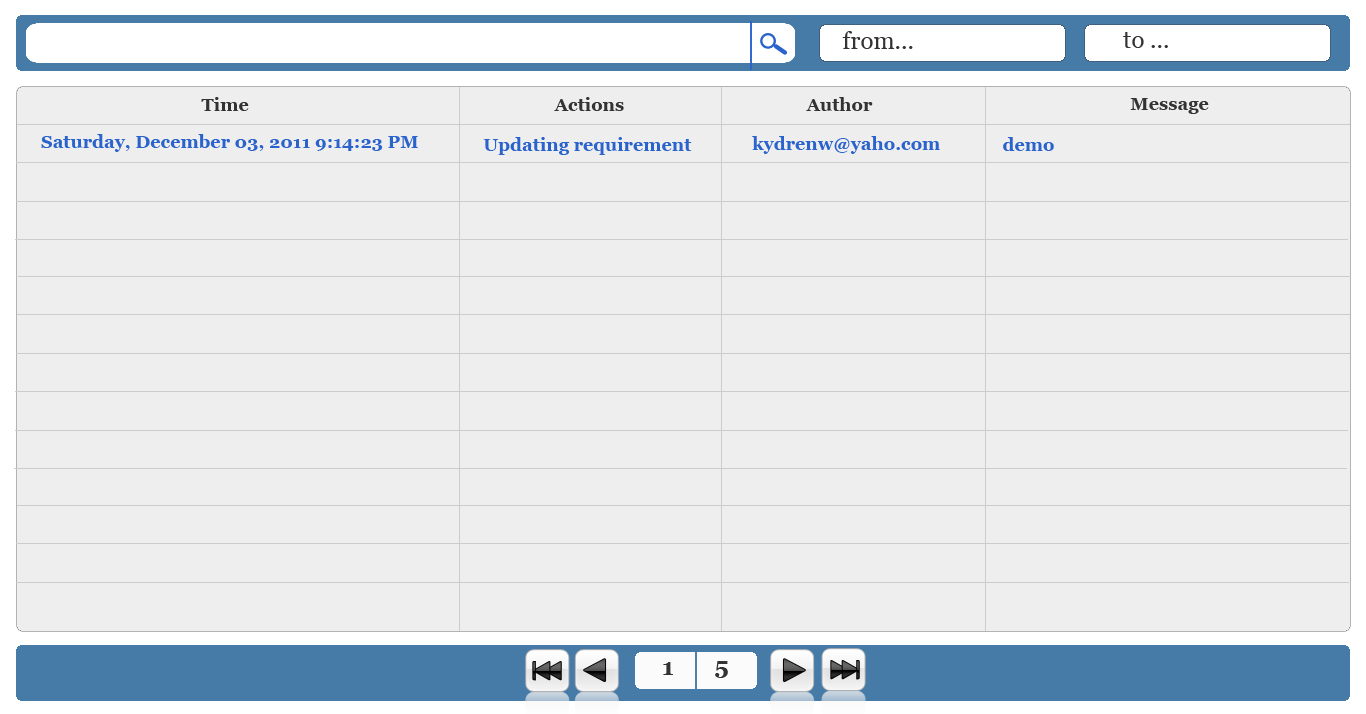
<style>
.page{position:relative;width:1366px;height:714px;background:#eeeeee}
.page>*{position:absolute;margin:0}
.t1{font:24px "Vani";color:#333333}
.t2{font:18px "Vani-Bold";color:#333333}
.t3{font:18px "Vani-Bold";color:#2a63cc}
.t4{font:24px "Vani-Bold";color:#333333}
</style>
<div class="page">
<p class="t1" style="left:842px;top:31px;width:71px;height:18px">from...</p>
<p class="t1" style="left:1123px;top:32px;width:45px;height:16px">to ...</p>
<p class="t2" style="left:201px;top:97px;width:48px;height:14px">Time</p>
<p class="t2" style="left:554px;top:97px;width:70px;height:14px">Actions</p>
<p class="t2" style="left:806px;top:97px;width:67px;height:14px">Author</p>
<p class="t2" style="left:1130px;top:98px;width:79px;height:16px">Message</p>
<p class="t3" style="left:41px;top:134px;width:377px;height:18px">Saturday, December 03, 2011 9:14:23 PM</p>
<p class="t3" style="left:483px;top:137px;width:209px;height:18px">Updating requirement</p>
<p class="t3" style="left:752px;top:136px;width:188px;height:18px">kydrenw@yaho.com</p>
<p class="t3" style="left:1003px;top:137px;width:51px;height:14px">demo</p>
<p class="t4" style="left:663px;top:662px;width:10px;height:13px">1</p>
<p class="t4" style="left:715px;top:661px;width:13px;height:17px">5</p>
</div>
